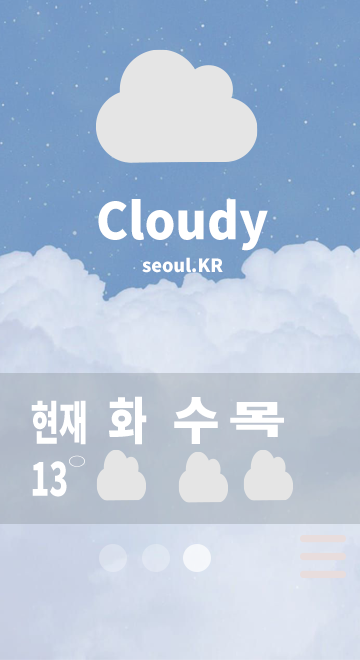
<style>
.page{position:relative;width:360px;height:660px}
.page>*{position:absolute;margin:0}
.t1{font:50.3px "NotoSansKR-Black";color:#ffffff;scale:0.96 1}
.t2{font:18px "NotoSansKR-Black";color:#ffffff}
.t3{font:46.5px "NotoSansKR-Black";color:#ffffff;scale:0.67 1}
.t4{font:50.5px "NotoSansKR-Black";color:#ffffff;scale:0.85 1}
.t5{font:51.2px "NotoSansKR-Black";color:#ffffff}
.t6{font:38.8px "NotoSansKR-Black";color:#ffffff;scale:1.63 1}
.t7{font:12.3px "NotoSansKR-Black";color:#ffffff;scale:1.46 1}
</style>
<div class="page">
<p class="t1" style="left:98px;top:199px;width:170px;height:52px">Cloudy</p>
<p class="t2" style="left:142px;top:257px;width:81px;height:16px">seoul.KR</p>
<p class="t3" style="left:31px;top:400px;width:55px;height:97px">현재<br>13</p>
<p class="t4" style="left:109px;top:396px;width:38px;height:49px">화</p>
<p class="t5" style="left:174px;top:397px;width:44px;height:47px">수</p>
<p class="t6" style="left:230px;top:402px;width:54px;height:35px">목</p>
<p class="t7" style="left:69px;top:455px;width:16px;height:12px">○</p>
</div>
